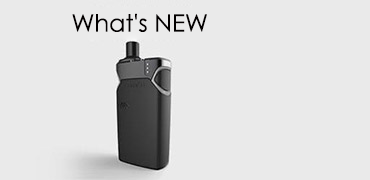
<style>
.page{position:relative;width:370px;height:180px;background:#eaeaea}
.page>*{position:absolute;margin:0}
.t1{font:24px "AvantGardeBook";color:#030000}
</style>
<div class="page">
<p class="t1" style="left:72px;top:13px;width:135px;height:19px">What's NEW</p>
</div>
